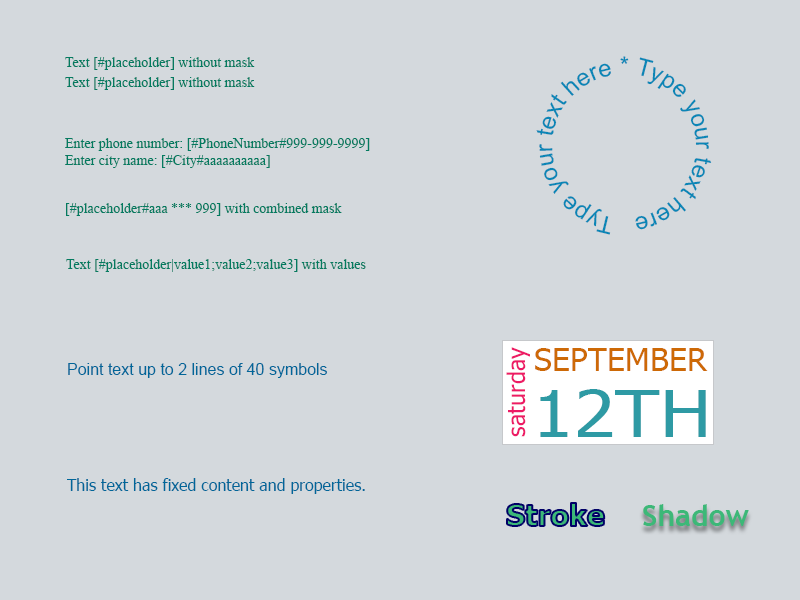
<style>
.page{position:relative;width:800px;height:600px;background:#d4d9dd}
.page>*{position:absolute;margin:0}
.t1{font:14px "TimesNewRomanPSMT";color:#047b60}
.t2{font:24px "ArialMT";color:#0a86b6}
.t3{font:24.4px "Tahoma";color:#ed1a65;scale:0.97 1}
.t4{font:32px "Tahoma";color:#cd6906;text-transform:uppercase}
.t5{font:16px "ArialMT";color:#006699}
.t6{font:65.1px "Tahoma";color:#2e9aa4;text-transform:uppercase;scale:1.17 1}
.t7{font:16px "Tahoma";color:#006699}
.t8{font:30px "Tahoma-Bold"}
.t9{font:30px "TrebuchetMS-Bold";color:#3cb878}
</style>
<div class="page">
<p class="t1" style="left:65px;top:57px;width:190px;height:13px">Text [#placeholder] without mask</p>
<p class="t2" style="left:536px;top:56px;width:176px;height:179px;text-align:center">Type your text here * Type your text here</p>
<p class="t1" style="left:65px;top:77px;width:190px;height:13px">Text [#placeholder] without mask</p>
<p class="t1" style="left:65px;top:138px;width:305px;height:30px">Enter phone number: [#PhoneNumber#999-999-9999]<br>Enter city name: [#City#aaaaaaaaaa]</p>
<p class="t1" style="left:66px;top:203px;width:276px;height:13px">[#placeholder#aaa *** 999] with combined mask</p>
<p class="t1" style="left:66px;top:259px;width:300px;height:13px">Text [#placeholder|value1;value2;value3] with values</p>
<p class="t3" style="left:506px;top:347px;width:24px;height:90px;rotate:-90deg">saturday</p>
<p class="t4" style="left:535px;top:348px;width:173px;height:23px">september</p>
<p class="t5" style="left:68px;top:363px;width:259px;height:15px">Point text up to 2 lines of 40 symbols</p>
<p class="t6" style="left:540px;top:389px;width:166px;height:48px">12th</p>
<p class="t7" style="left:67px;top:478px;width:298px;height:16px">This text has fixed content and properties.</p>
<p class="t8" style="left:507px;top:503px;width:98px;height:23px">Stroke</p>
<p class="t9" style="left:643px;top:504px;width:106px;height:22px">Shadow</p>
</div>
